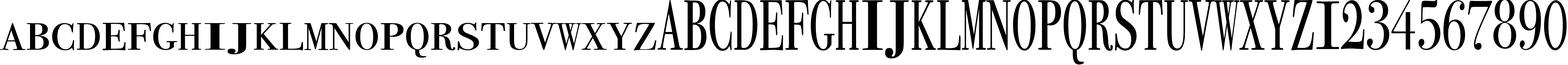
<style>
.page{position:relative;width:1568px;height:65px;background:#ffffff}
.page>*{position:absolute;margin:0}
.t1{font:108.4px "BodoniSvtyTwoSCITCTT-Book";color:#000000;scale:0.49 1}
.t2{font:108.4px "BodoniSvtyTwoSCITCTT-Book";color:#000000;scale:0.56 1}
.t3{font:108.4px "BodoniSvtyTwoSCITCTT-Book";color:#000000;scale:0.51 1}
.t4{font:108.4px "BodoniSvtyTwoSCITCTT-Book";color:#000000;scale:0.45 1}
.t5{font:108.4px "BodoniSvtyTwoSCITCTT-Book";color:#000000;scale:0.58 1}
.t6{font:108.4px "BodoniSvtyTwoSCITCTT-Book";color:#000000;scale:0.46 1}
.t7{font:108.4px "BodoniSvtyTwoSCITCTT-Book";color:#000000}
.t8{font:108.4px "BodoniSvtyTwoSCITCTT-Book";color:#000000;scale:0.87 1}
.t9{font:108.4px "BodoniSvtyTwoSCITCTT-Book";color:#000000;scale:0.42 1}
.t10{font:108.4px "BodoniSvtyTwoSCITCTT-Book";color:#000000;scale:0.6 1}
.t11{font:108.4px "BodoniSvtyTwoSCITCTT-Book";color:#000000;scale:0.53 1}
.t12{font:108.4px "BodoniSvtyTwoSCITCTT-Book";color:#000000;scale:0.55 1}
.t13{font:108.4px "BodoniSvtyTwoSCITCTT-Book";color:#000000;scale:0.34 1}
.t14{font:108.4px "BodoniSvtyTwoSCITCTT-Book";color:#000000;scale:0.5 1}
.t15{font:108.4px "BodoniSvtyTwoSCITCTT-Book";color:#000000;scale:0.57 1}
.t16{font:108.4px "BodoniSvtyTwoSCITCTT-Book";color:#000000;scale:0.73 1}
.t17{font:73.8px "BodoniSvtyTwoSCITCTT-Book";color:#000000;scale:0.76 1}
.t18{font:73.8px "BodoniSvtyTwoSCITCTT-Book";color:#000000;scale:0.7 1}
.t19{font:73.8px "BodoniSvtyTwoSCITCTT-Book";color:#000000;scale:0.78 1}
.t20{font:58.2px "BodoniSvtyTwoSCITCTT-Book";color:#000000;scale:0.9 1}
.t21{font:58.2px "BodoniSvtyTwoSCITCTT-Book";color:#000000;scale:1.04 1}
.t22{font:58.2px "BodoniSvtyTwoSCITCTT-Book";color:#000000;scale:0.95 1}
.t23{font:58.2px "BodoniSvtyTwoSCITCTT-Book";color:#000000;scale:0.84 1}
.t24{font:58.2px "BodoniSvtyTwoSCITCTT-Book";color:#000000;scale:1.08 1}
.t25{font:58.2px "BodoniSvtyTwoSCITCTT-Book";color:#000000;scale:0.85 1}
.t26{font:58.2px "BodoniSvtyTwoSCITCTT-Book";color:#000000;scale:1.81 1}
.t27{font:58.2px "BodoniSvtyTwoSCITCTT-Book";color:#000000;scale:1.62 1}
.t28{font:58.2px "BodoniSvtyTwoSCITCTT-Book";color:#000000;scale:0.86 1}
.t29{font:58.2px "BodoniSvtyTwoSCITCTT-Book";color:#000000;scale:1.05 1}
.t30{font:58.2px "BodoniSvtyTwoSCITCTT-Book";color:#000000;scale:0.79 1}
.t31{font:58.2px "BodoniSvtyTwoSCITCTT-Book";color:#000000;scale:0.91 1}
.t32{font:58.2px "BodoniSvtyTwoSCITCTT-Book";color:#000000;scale:1.12 1}
.t33{font:58.2px "BodoniSvtyTwoSCITCTT-Book";color:#000000}
.t34{font:58.2px "BodoniSvtyTwoSCITCTT-Book";color:#000000;scale:1.2 1}
.t35{font:58.2px "BodoniSvtyTwoSCITCTT-Book";color:#000000;scale:0.63 1}
.t36{font:58.2px "BodoniSvtyTwoSCITCTT-Book";color:#000000;scale:0.93 1}
.t37{font:58.2px "BodoniSvtyTwoSCITCTT-Book";color:#000000;scale:1.07 1}
</style>
<div class="page">
<p class="t1" style="left:658px;top:0px;width:25px;height:50px">a</p>
<p class="t2" style="left:684px;top:0px;width:23px;height:50px">b</p>
<p class="t3" style="left:710px;top:0px;width:22px;height:51px">c</p>
<p class="t4" style="left:734px;top:0px;width:23px;height:50px">d</p>
<p class="t2" style="left:760px;top:0px;width:23px;height:50px">e</p>
<p class="t5" style="left:785px;top:0px;width:24px;height:50px">f</p>
<p class="t1" style="left:811px;top:0px;width:24px;height:50px">g</p>
<p class="t6" style="left:836px;top:0px;width:23px;height:50px">h</p>
<p class="t7" style="left:862px;top:0px;width:21px;height:50px">i</p>
<p class="t8" style="left:885px;top:0px;width:24px;height:58px">j</p>
<p class="t6" style="left:911px;top:0px;width:25px;height:50px">k</p>
<p class="t2" style="left:937px;top:0px;width:24px;height:50px">l</p>
<p class="t9" style="left:962px;top:0px;width:24px;height:50px">m</p>
<p class="t1" style="left:986px;top:0px;width:25px;height:50px">n</p>
<p class="t6" style="left:1013px;top:0px;width:23px;height:50px">o</p>
<p class="t10" style="left:1038px;top:0px;width:23px;height:50px">p</p>
<p class="t6" style="left:1063px;top:0px;width:23px;height:64px">q</p>
<p class="t11" style="left:1088px;top:0px;width:25px;height:51px">r</p>
<p class="t12" style="left:1139px;top:0px;width:24px;height:50px">t</p>
<p class="t1" style="left:1164px;top:0px;width:24px;height:50px">u</p>
<p class="t1" style="left:1189px;top:0px;width:25px;height:51px">v</p>
<p class="t13" style="left:1214px;top:0px;width:25px;height:50px">w</p>
<p class="t14" style="left:1239px;top:0px;width:26px;height:50px">x</p>
<p class="t3" style="left:1264px;top:0px;width:26px;height:50px">y</p>
<p class="t15" style="left:1291px;top:0px;width:23px;height:50px">z</p>
<p class="t16" style="left:1316px;top:1px;width:23px;height:48px">1</p>
<p class="t14" style="left:1341px;top:0px;width:23px;height:49px">2</p>
<p class="t17" style="left:1367px;top:0px;width:22px;height:50px">3</p>
<p class="t18" style="left:1443px;top:0px;width:22px;height:50px">6</p>
<p class="t19" style="left:1468px;top:1px;width:24px;height:49px">7</p>
<p class="t18" style="left:1519px;top:0px;width:22px;height:50px">9</p>
<p class="t9" style="left:1544px;top:0px;width:23px;height:50px">0</p>
<p class="t20" style="left:0px;top:23px;width:26px;height:27px">a</p>
<p class="t21" style="left:27px;top:23px;width:22px;height:27px">b</p>
<p class="t22" style="left:52px;top:23px;width:22px;height:27px">c</p>
<p class="t23" style="left:77px;top:23px;width:23px;height:27px">d</p>
<p class="t21" style="left:102px;top:23px;width:24px;height:27px">e</p>
<p class="t24" style="left:128px;top:23px;width:23px;height:27px">f</p>
<p class="t20" style="left:153px;top:23px;width:24px;height:27px">g</p>
<p class="t25" style="left:178px;top:23px;width:23px;height:27px">h</p>
<p class="t26" style="left:205px;top:23px;width:20px;height:27px">i</p>
<p class="t27" style="left:227px;top:23px;width:24px;height:31px">j</p>
<p class="t28" style="left:254px;top:23px;width:24px;height:27px">k</p>
<p class="t29" style="left:279px;top:23px;width:24px;height:27px">l</p>
<p class="t30" style="left:304px;top:23px;width:25px;height:27px">m</p>
<p class="t31" style="left:329px;top:23px;width:24px;height:27px">n</p>
<p class="t28" style="left:355px;top:23px;width:23px;height:27px">o</p>
<p class="t32" style="left:381px;top:23px;width:23px;height:27px">p</p>
<p class="t28" style="left:406px;top:23px;width:23px;height:34px">q</p>
<p class="t33" style="left:431px;top:23px;width:24px;height:27px">r</p>
<p class="t34" style="left:458px;top:23px;width:21px;height:27px">s</p>
<p class="t33" style="left:481px;top:23px;width:24px;height:27px">t</p>
<p class="t20" style="left:507px;top:23px;width:24px;height:27px">u</p>
<p class="t31" style="left:531px;top:23px;width:25px;height:27px">v</p>
<p class="t35" style="left:556px;top:23px;width:26px;height:27px">w</p>
<p class="t36" style="left:581px;top:23px;width:26px;height:27px">x</p>
<p class="t22" style="left:607px;top:23px;width:25px;height:27px">y</p>
<p class="t37" style="left:634px;top:23px;width:23px;height:27px">z</p>
</div>
